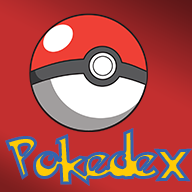
<style>
.page{position:relative;width:192px;height:192px;background:#c32f2f}
.page>*{position:absolute;margin:0}
.t1{font:48px "PokemonSolidNormal"}
</style>
<div class="page">
<p class="t1" style="left:5px;top:128px;width:187px;height:58px">Pokedex</p>
</div>
